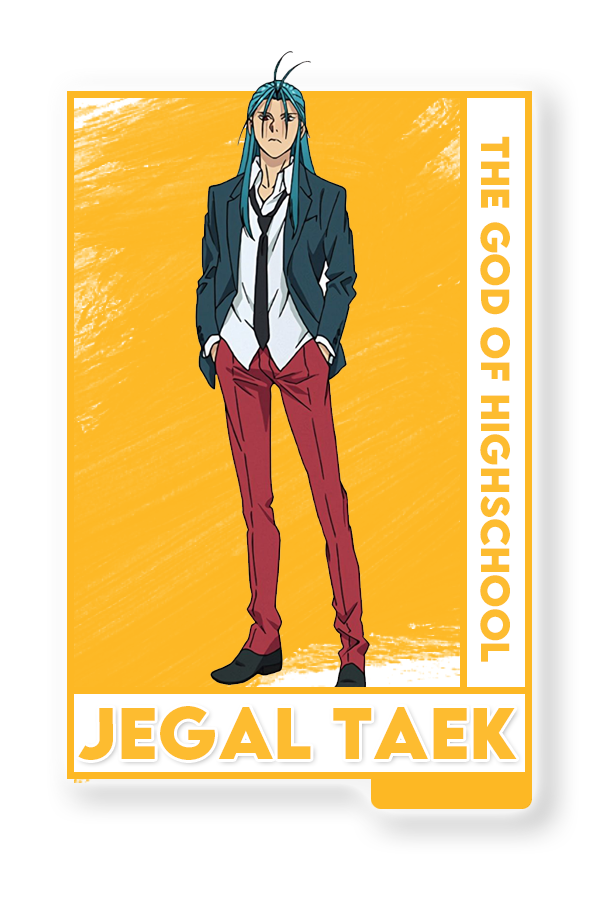
<style>
.page{position:relative;width:600px;height:900px;background:#ffffff}
.page>*{position:absolute;margin:0}
.t1{font:36px "LEMONMILK-Bold";color:#fdbc30}
.t2{font:65.2px "LEMONMILK-Bold";color:#fdbc30}
</style>
<div class="page">
<p class="t1" style="left:480px;top:136px;width:30px;height:526px;rotate:90deg">the god of highschool</p>
<p class="t2" style="left:78px;top:706px;width:439px;height:54px">Jegal Taek</p>
</div>
